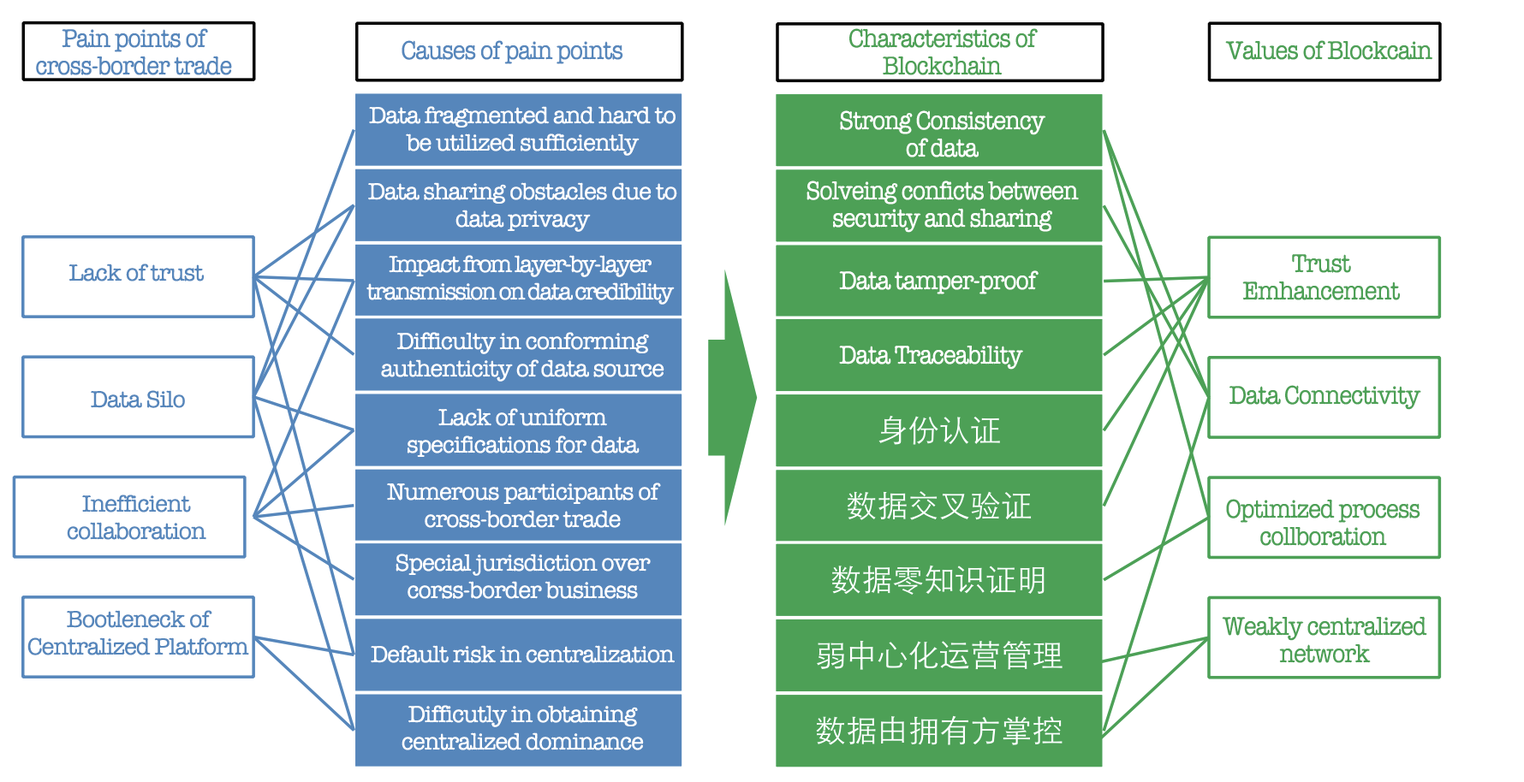
<style>
.page{position:relative;width:1524px;height:782px;background:#ffffff}
.page>*{position:absolute;margin:0}
.t1{font:26.4px/27.4px "AmericanTypewriter";letter-spacing:-0.04em;color:#5686bb;scale:0.91 1}
.t2{font:26.4px/27.4px "AmericanTypewriter";letter-spacing:-0.04em;color:#4da056;scale:0.91 1}
.t3{font:26.4px "AmericanTypewriter";letter-spacing:-0.04em;color:#5686bb;scale:0.91 1}
.t4{font:26.4px "AmericanTypewriter";letter-spacing:-0.04em;color:#4da056;scale:0.91 1}
.t5{font:24px/27.4px "AmericanTypewriter";letter-spacing:-0.04em;color:#ffffff}
.t6{font:26.4px/27.4px "AmericanTypewriter";letter-spacing:-0.04em;color:#ffffff;scale:0.91 1}
.t7{font:24px/27.4px "AmericanTypewriter";letter-spacing:-0.08em;color:#ffffff}
.t8{font:24px "AmericanTypewriter";letter-spacing:-0.04em;color:#5686bb}
.t9{font:26.4px "AmericanTypewriter";letter-spacing:-0.04em;color:#ffffff;scale:0.91 1}
.t10{font:24px/27.4px "AmericanTypewriter";letter-spacing:-0.04em;color:#5686bb}
.t11{font:24px "AmericanTypewriter";letter-spacing:-0.04em;color:#ffffff}
</style>
<div class="page">
<p class="t1" style="left:36px;top:28px;width:196px;height:47px;text-align:center">Pain points of <br>cross-border trade</p>
<p class="t2" style="left:849px;top:28px;width:189px;height:47px;text-align:center">Characteristics of Blockchain</p>
<p class="t3" style="left:402px;top:40px;width:221px;height:24px">Causes of pain points</p>
<p class="t4" style="left:1225px;top:40px;width:207px;height:20px">Values of Blockcain</p>
<p class="t5" style="left:369px;top:106px;width:306px;height:50px;text-align:center">Data fragmented and hard to be utilized sufficiently</p>
<p class="t6" style="left:840px;top:110px;width:206px;height:48px;text-align:center">Strong Consistency <br>of data</p>
<p class="t5" style="left:368px;top:182px;width:309px;height:50px;text-align:center">Data sharing obstacles due to data privacy</p>
<p class="t6" style="left:806px;top:181px;width:273px;height:52px;text-align:center">Solveing conficts between security and sharing</p>
<p class="t7" style="left:366px;top:255px;width:309px;height:50px;text-align:center">Impact from layer-by-layer transmission on data credibility</p>
<p class="t2" style="left:1242px;top:254px;width:158px;height:46px;text-align:center">Trust <br>Emhancement</p>
<p class="t8" style="left:68px;top:264px;width:136px;height:18px">Lack of trust</p>
<p class="t9" style="left:839px;top:271px;width:199px;height:24px">Data tamper-proof</p>
<p class="t5" style="left:381px;top:332px;width:283px;height:50px;text-align:center">Difficulty in conforming authenticity of data source</p>
<p class="t9" style="left:839px;top:346px;width:184px;height:24px">Data Traceability</p>
<p class="t4" style="left:1229px;top:385px;width:192px;height:25px">Data Connectivity</p>
<p class="t8" style="left:91px;top:390px;width:94px;height:18px">Data Silo</p>
<p class="t5" style="left:407px;top:408px;width:233px;height:49px;text-align:center">Lack of uniform <br>specifications for data</p>
<p class="t5" style="left:387px;top:483px;width:274px;height:45px;text-align:center">Numerous participants of cross-border trade</p>
<p class="t10" style="left:67px;top:495px;width:139px;height:45px;text-align:center">Inefficient <br>collaboration</p>
<p class="t2" style="left:1226px;top:499px;width:194px;height:47px;text-align:center">Optimized process collboration</p>
<p class="t5" style="left:396px;top:554px;width:255px;height:45px;text-align:center">Special jurisdiction over corss-border business</p>
<p class="t10" style="left:27px;top:610px;width:222px;height:46px;text-align:center">Bootleneck of <br>Centralized Platform</p>
<p class="t2" style="left:1222px;top:616px;width:205px;height:47px;text-align:center">Weakly centralized network</p>
<p class="t11" style="left:371px;top:646px;width:304px;height:17px">Default risk in centralization</p>
<p class="t5" style="left:402px;top:705px;width:242px;height:46px;text-align:center">Difficutly in obtaining centralized dominance</p>
</div>
